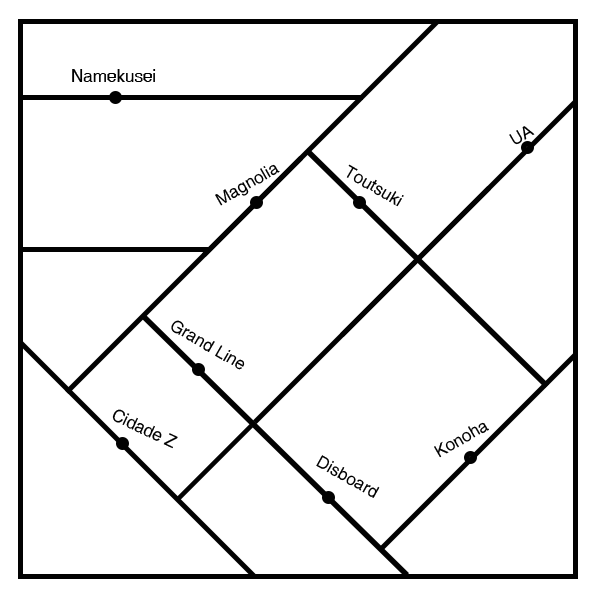
<style>
.page{position:relative;width:600px;height:600px;background:#ffffff}
.page>*{position:absolute;margin:0}
.t1{font:17px "Helvetica";color:#000000}
</style>
<div class="page">
<p class="t1" style="left:72px;top:69px;width:84px;height:13px">Namekusei</p>
<p class="t1" style="left:509px;top:126px;width:26px;height:19px;rotate:-30deg">UA</p>
<p class="t1" style="left:215px;top:164px;width:65px;height:42px;rotate:-30deg">Magnolia</p>
<p class="t1" style="left:346px;top:164px;width:58px;height:43px;rotate:30deg">Toutsuki</p>
<p class="t1" style="left:171px;top:320px;width:74px;height:50px;rotate:30deg">Grand Line</p>
<p class="t1" style="left:112px;top:409px;width:66px;height:40px;rotate:25deg">Cidade Z</p>
<p class="t1" style="left:434px;top:422px;width:55px;height:36px;rotate:-30deg">Konoha</p>
<p class="t1" style="left:316px;top:455px;width:64px;height:43px;rotate:29deg">Disboard</p>
</div>
